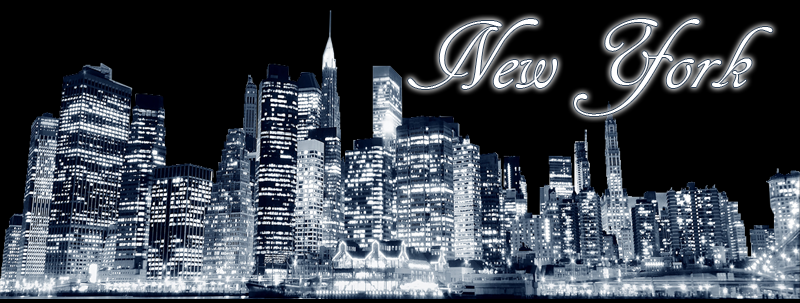
<style>
.page{position:relative;width:800px;height:303px;background:#000000}
.page>*{position:absolute;margin:0}
.t1{font:100px "ARDECODE";color:#ffffff}
</style>
<div class="page">
<p class="t1" style="left:408px;top:19px;width:365px;height:97px">New York</p>
</div>
